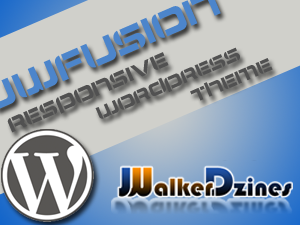
<style>
.page{position:relative;width:300px;height:225px;background:#d0d0cb}
.page>*{position:absolute;margin:0}
.t1{font:20px "AirlockRegular";color:#515151}
.t2{font:18px "AirlockRegular";color:#515151}
</style>
<div class="page">
<p class="t1" style="left:7px;top:52px;width:162px;height:81px;rotate:-23deg">responsive</p>
<p class="t2" style="left:95px;top:47px;width:145px;height:72px;rotate:-23deg">WordPress</p>
<p class="t2" style="left:190px;top:58px;width:83px;height:43px;rotate:-23deg">Theme</p>
</div>
